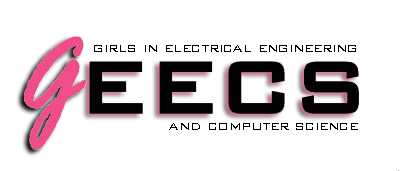
<style>
.page{position:relative;width:400px;height:171px;background:#ffffff}
.page>*{position:absolute;margin:0}
.t1{font:16px "BankGothicBT-Light";color:#000000}
</style>
<div class="page">
<p class="t1" style="left:94px;top:45px;width:262px;height:7px">girls in electrical engineering</p>
<p class="t1" style="left:169px;top:123px;width:189px;height:7px">and computer science</p>
</div>
